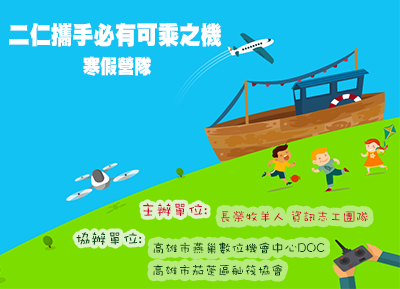
<style>
.page{position:relative;width:400px;height:289px;background:#12c2f3}
.page>*{position:absolute;margin:0}
.t1{font:25px/30px "DFHei-UB-HK-BF";color:#ffffff;scale:0.85 1}
.t2{font:20px/30px "DFHei-UB-HK-BF";color:#ffffff;scale:0.85 1}
.t3{font:16px "DFWaWaTC-W5";color:#d60036}
.t4{font:13.3px "DFWaWaTC-W5";color:#d60036}
.t5{font:16px "DFWaWaTC-W5";color:#004b17}
.t6{font:13.3px "DFWaWaTC-W5";color:#003d13}
</style>
<div class="page">
<p class="t1" style="left:9px;top:22px;width:213px;height:54px">二仁攜手必有可乘之機<br>       <span class="t2">寒假營隊</span></p>
<p class="t3" style="left:143px;top:203px;width:64px;height:14px">主辦單位:</p>
<p class="t4" style="left:221px;top:210px;width:147px;height:12px">長榮牧羊人 資訊志工團隊</p>
<p class="t5" style="left:76px;top:232px;width:66px;height:13px">協辦單位:</p>
<p class="t6" style="left:153px;top:242px;width:172px;height:12px">高雄市燕巢數位機會中心DOC</p>
<p class="t6" style="left:153px;top:264px;width:130px;height:12px">高雄市茄萣區舢筏協會</p>
</div>
